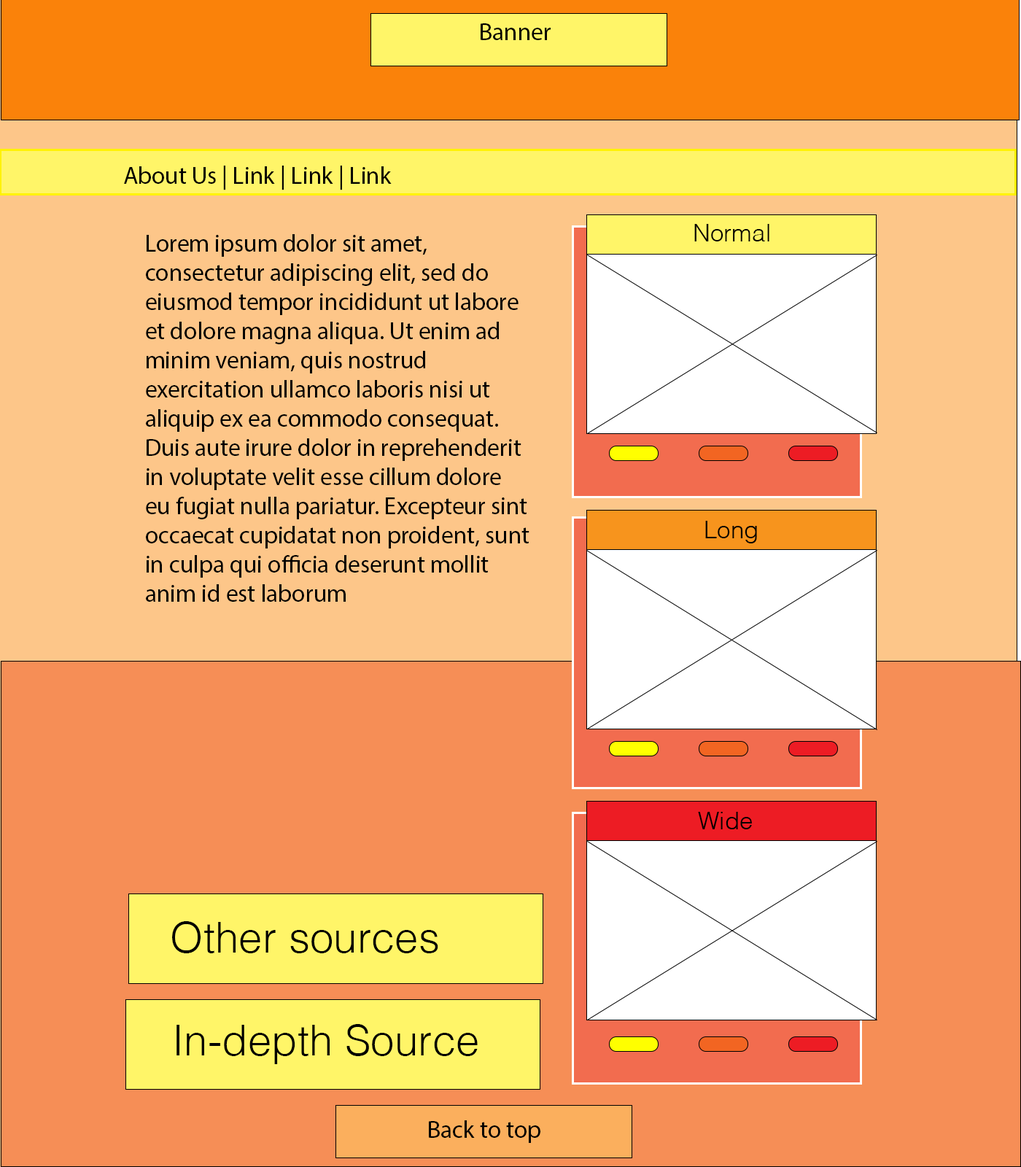
<style>
.page{position:relative;width:1021px;height:1167px;background:#f68e56}
.page>*{position:absolute;margin:0}
.t1{font:24.3px "MyriadPro-Regular";color:#000000}
.t2{font:24.3px "Helvetica-Light";color:#000000}
.t3{font:42.6px "Helvetica-Light";color:#000000}
</style>
<div class="page">
<p class="t1" style="left:481px;top:23px;width:70px;height:17px">Banner</p>
<p class="t1" style="left:124px;top:166px;width:268px;height:24px">About Us | Link | Link | Link</p>
<p class="t2" style="left:695px;top:224px;width:75px;height:18px">Normal</p>
<p class="t1" style="left:146px;top:234px;width:384px;height:368px">Lorem ipsum dolor sit amet, consectetur adipiscing elit, sed do eiusmod tempor incididunt ut labore et dolore magna aliqua. Ut enim ad minim veniam, quis nostrud exercitation ullamco laboris nisi ut aliquip ex ea commodo consequat. Duis aute irure dolor in reprehenderit in voluptate velit esse cillum dolore eu fugiat nulla pariatur. Excepteur sint occaecat cupidatat non proident, sunt in culpa qui officia deserunt mollit anim id est laborum</p>
<p class="t2" style="left:706px;top:521px;width:51px;height:23px">Long</p>
<p class="t2" style="left:698px;top:812px;width:54px;height:18px">Wide</p>
<p class="t3" style="left:172px;top:922px;width:266px;height:32px">Other sources</p>
<p class="t3" style="left:177px;top:1024px;width:301px;height:41px">In-depth Source</p>
<p class="t1" style="left:429px;top:1121px;width:112px;height:22px">Back to top</p>
</div>
